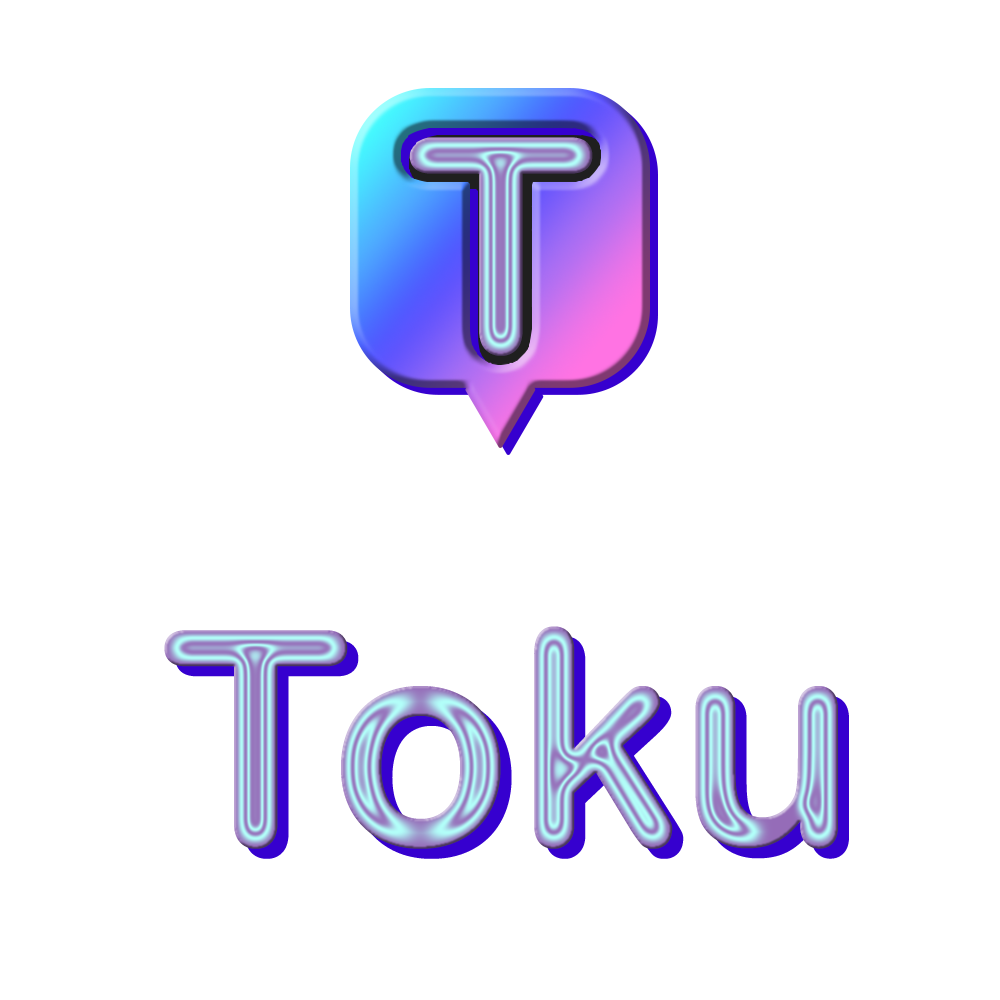
<style>
.page{position:relative;width:1000px;height:1000px;background:#ffffff}
.page>*{position:absolute;margin:0}
.t1{font:300px "ArialRoundedMTBold"}
</style>
<div class="page">
<p class="t1" style="left:164px;top:626px;width:674px;height:223px">Toku</p>
</div>
